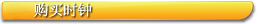
<style>
.page{position:relative;width:260px;height:24px}
.page>*{position:absolute;margin:0}
.t1{font:15px "NSimSun";letter-spacing:-0.05em;color:#ffffff;font-weight:bold}
</style>
<div class="page">
<p class="t1" style="left:33px;top:2px;width:59px;height:15px">购买时钟</p>
</div>
